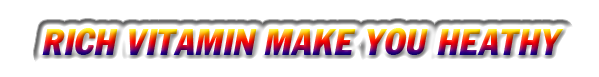
<style>
.page{position:relative;width:599px;height:77px;background:#ffffff}
.page>*{position:absolute;margin:0}
.t1{font:36px "VNI-Franko";font-style:italic}
</style>
<div class="page">
<p class="t1" style="left:42px;top:28px;width:522px;height:27px">RICH VITAMIN MAKE YOU HEATHY</p>
</div>
